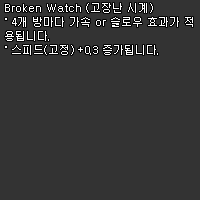
<style>
.page{position:relative;width:200px;height:200px;background:#333333}
.page>*{position:absolute;margin:0}
.t1{font:11px/14px "Dotum";color:#ffffff}
</style>
<div class="page">
<p class="t1" style="left:5px;top:3px;width:188px;height:52px">Broken Watch (고장난 시계)<br>˚ 4개 방마다 가속 or 슬로우 효과가 적<br>용됩니다.<br>˚ 스피드(고정) +0.3 증가됩니다.</p>
</div>
